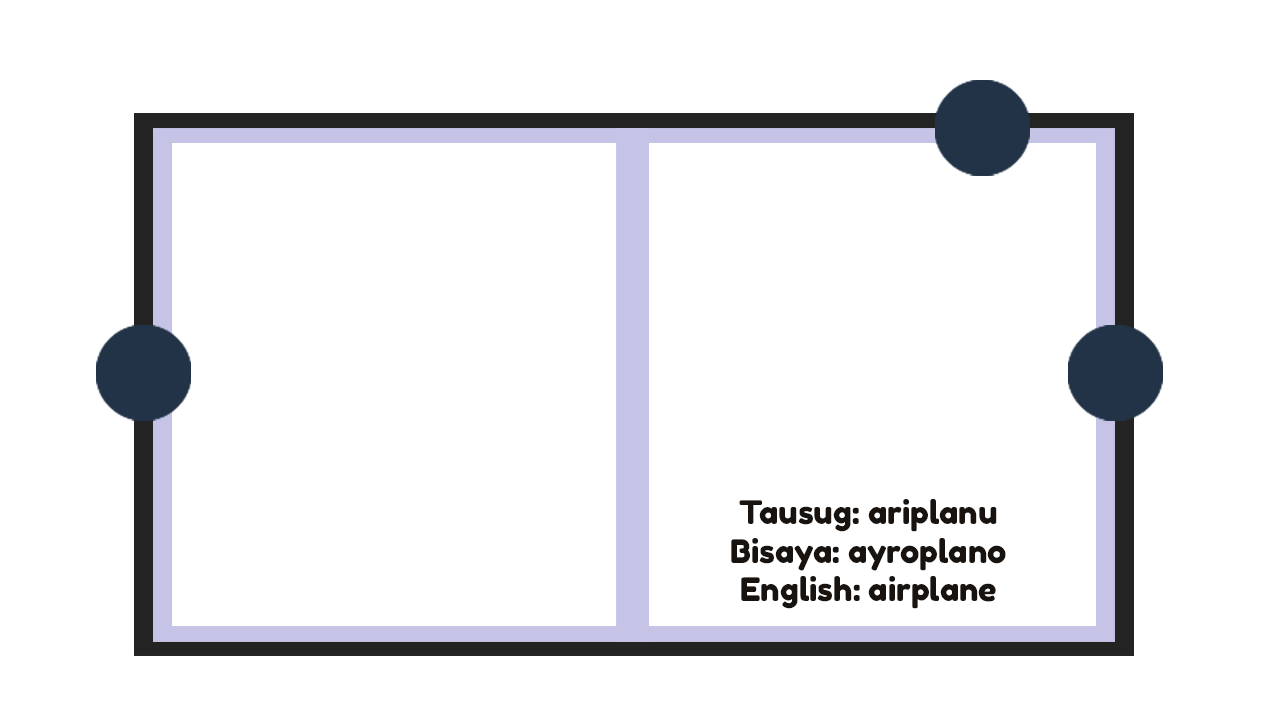
<style>
.page{position:relative;width:1280px;height:720px;background:#ffffff}
.page>*{position:absolute;margin:0}
.t1{font:32.2px "FredokaOne-Regular";color:#18130f}
</style>
<div class="page">
<p class="t1" style="left:731px;top:499px;width:275px;height:110px;text-align:center">Tausug: ariplanu<br>Bisaya: ayroplano<br>English: airplane</p>
</div>
